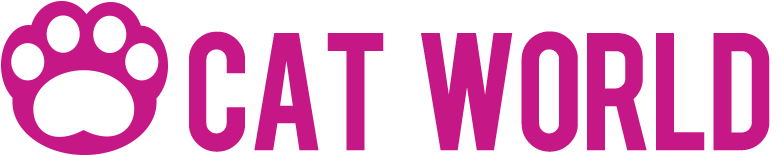
<style>
.page{position:relative;width:780px;height:155px;background:#ffffff}
.page>*{position:absolute;margin:0}
.t1{font:131.6px "Bebas";letter-spacing:-0.02em;color:#c61786}
</style>
<div class="page">
<p class="t1" style="left:189px;top:31px;width:581px;height:121px">Cat   World</p>
</div>
